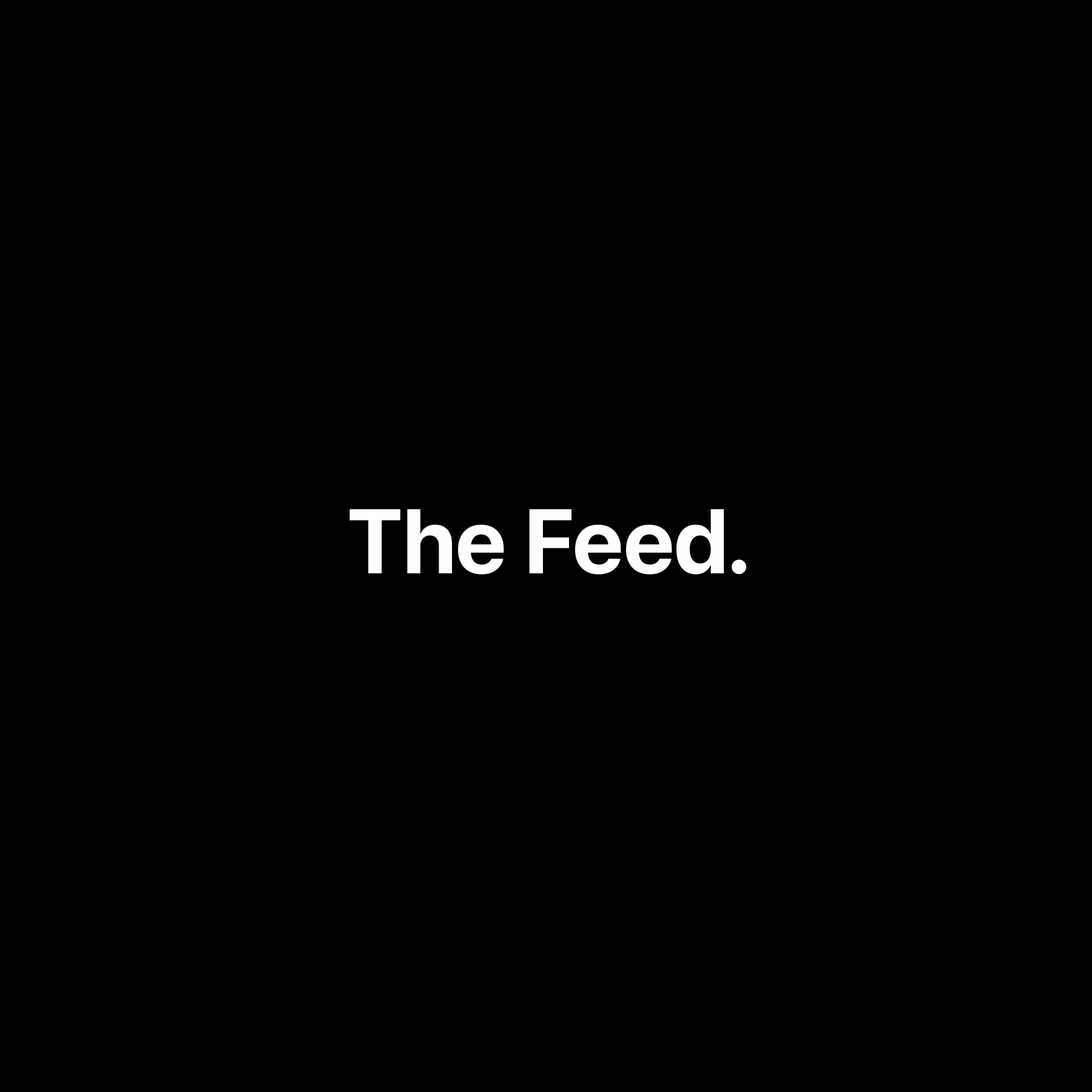
<style>
.page{position:relative;width:1092px;height:1092px;background:#000000}
.page>*{position:absolute;margin:0}
.t1{font:91px "SFPro-Bold";color:#ffffff}
</style>
<div class="page">
<p class="t1" style="left:349px;top:509px;width:397px;height:66px">The Feed.</p>
</div>
